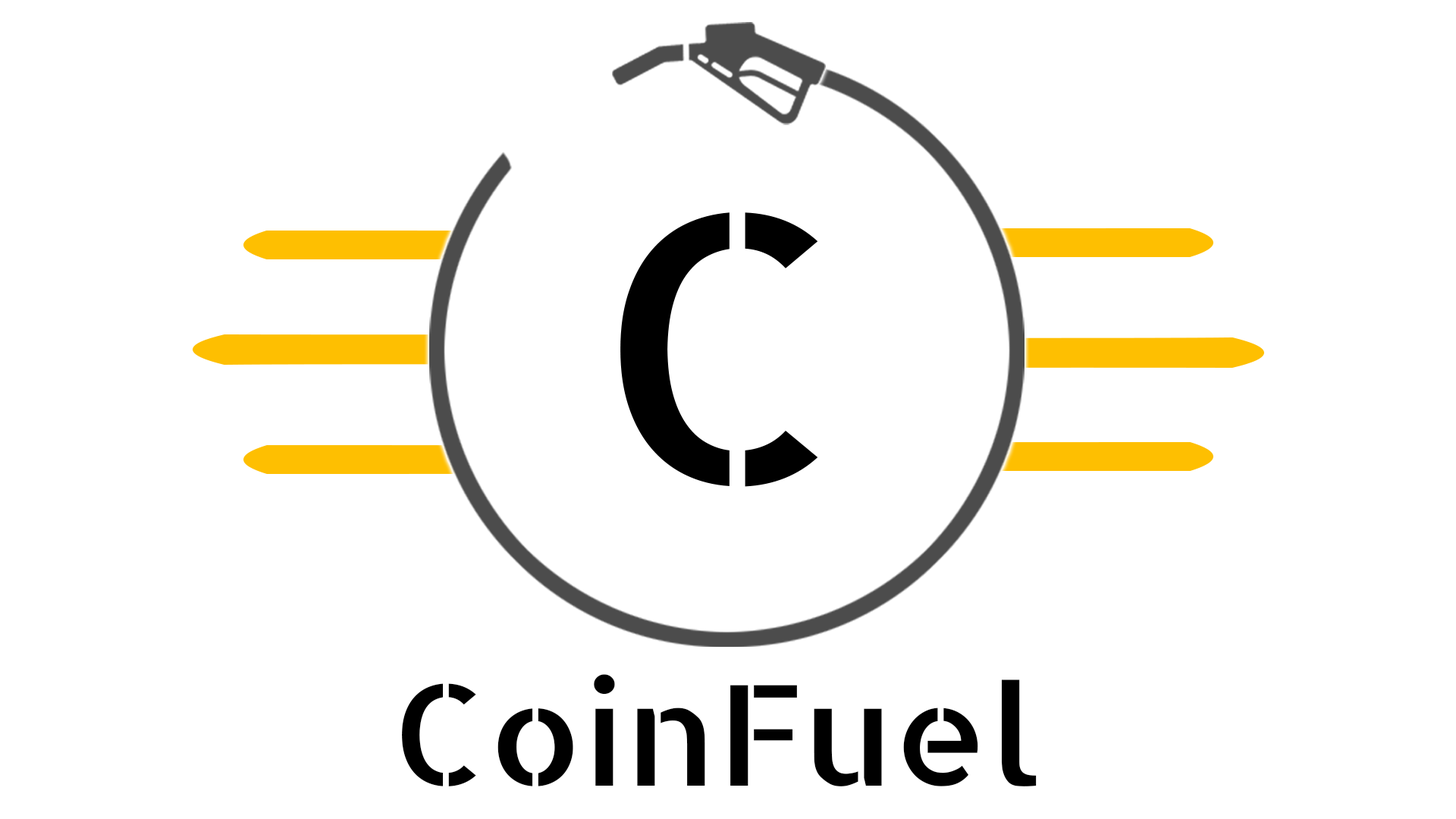
<style>
.page{position:relative;width:1456px;height:819px;background:#ffffff}
.page>*{position:absolute;margin:0}
.t1{font:372px "AllertaStencil-Regular";color:#000000;scale:1.06 1}
.t2{font:139.6px "AllertaStencil-Regular";color:#000000;scale:1.06 1}
</style>
<div class="page">
<p class="t1" style="left:620px;top:212px;width:198px;height:275px">C</p>
<p class="t2" style="left:402px;top:674px;width:635px;height:112px">CoinFuel</p>
</div>
